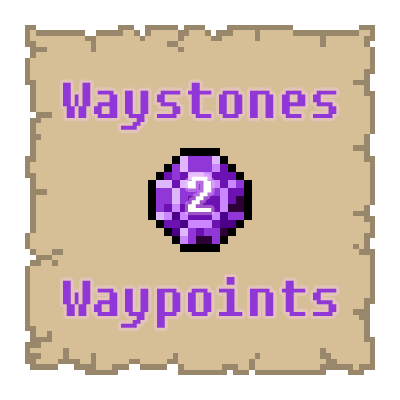
<style>
.page{position:relative;width:400px;height:400px;background:#d6be96}
.page>*{position:absolute;margin:0}
.t1{font:50px "Fixedsys";color:#9136d7}
.t2{font:50px "Fixedsys";color:#ffffff}
</style>
<div class="page">
<p class="t1" style="left:63px;top:82px;width:274px;height:48px">Waystones</p>
<p class="t2" style="left:188px;top:176px;width:24px;height:36px">2</p>
<p class="t1" style="left:63px;top:277px;width:274px;height:51px">Waypoints</p>
</div>
